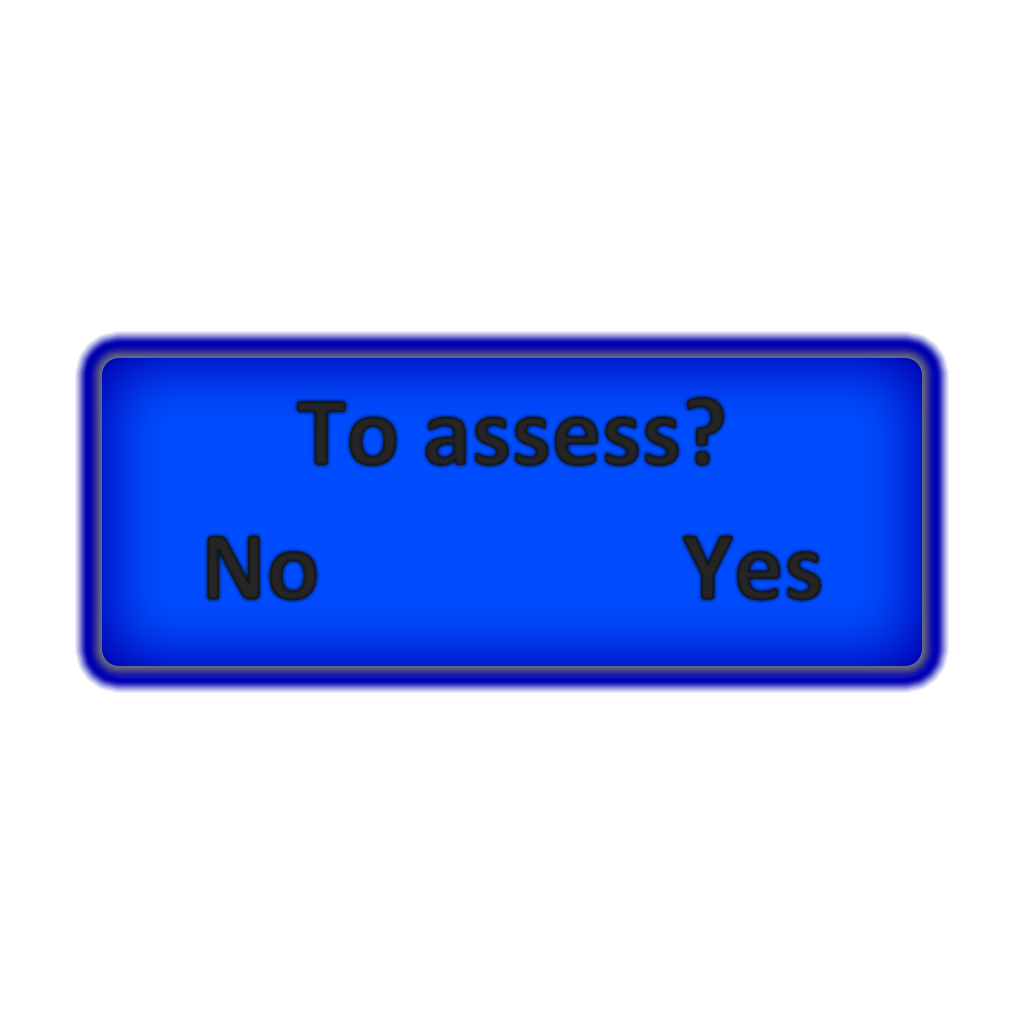
<style>
.page{position:relative;width:1024px;height:1024px;background:#ffffff}
.page>*{position:absolute;margin:0}
.t1{font:100px "Calibri-Bold";color:#222222}
.t2{font:100px "Calibri-Bold";color:#232323}
</style>
<div class="page">
<p class="t1" style="left:297px;top:397px;width:427px;height:69px">To assess?</p>
<p class="t2" style="left:207px;top:535px;width:614px;height:66px">No                Yes</p>
</div>
